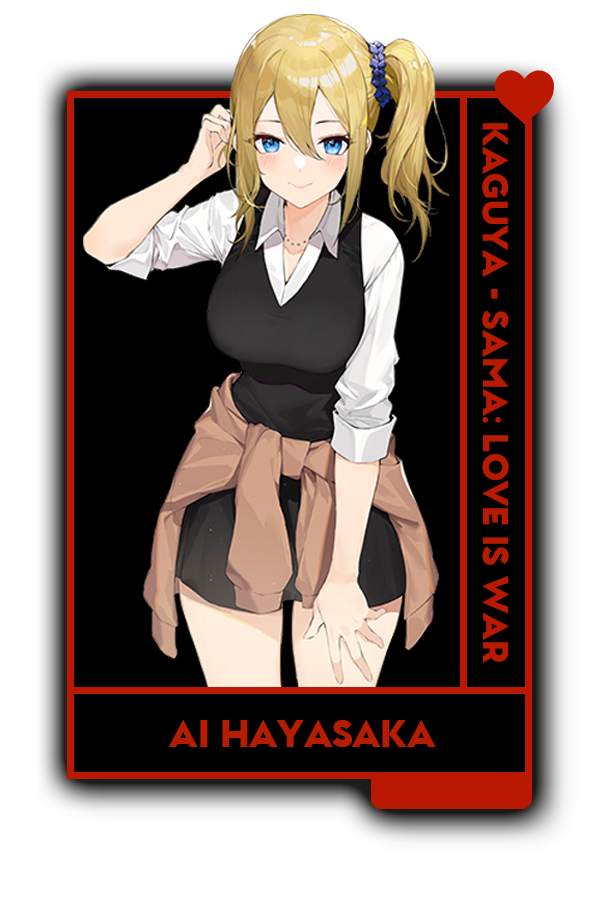
<style>
.page{position:relative;width:600px;height:900px;background:#000000}
.page>*{position:absolute;margin:0}
.t1{font:34px "GarnetCapitalsBlack-Regular";color:#b52616}
.t2{font:35.7px "GarnetCapitalsBlack-Regular";color:#b22818}
</style>
<div class="page">
<p class="t1" style="left:482px;top:123px;width:27px;height:540px;rotate:90deg">Kaguya - Sama: Love is war</p>
<p class="t2" style="left:169px;top:720px;width:267px;height:27px">AI HAYASAKA</p>
</div>
